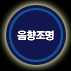
<style>
.page{position:relative;width:71px;height:71px;background:#111650}
.page>*{position:absolute;margin:0}
.t1{font:10px "HYgtrE";color:#ffffff;scale:0.96 1}
</style>
<div class="page">
<p class="t1" style="left:17px;top:30px;width:37px;height:11px">음향조명</p>
</div>
